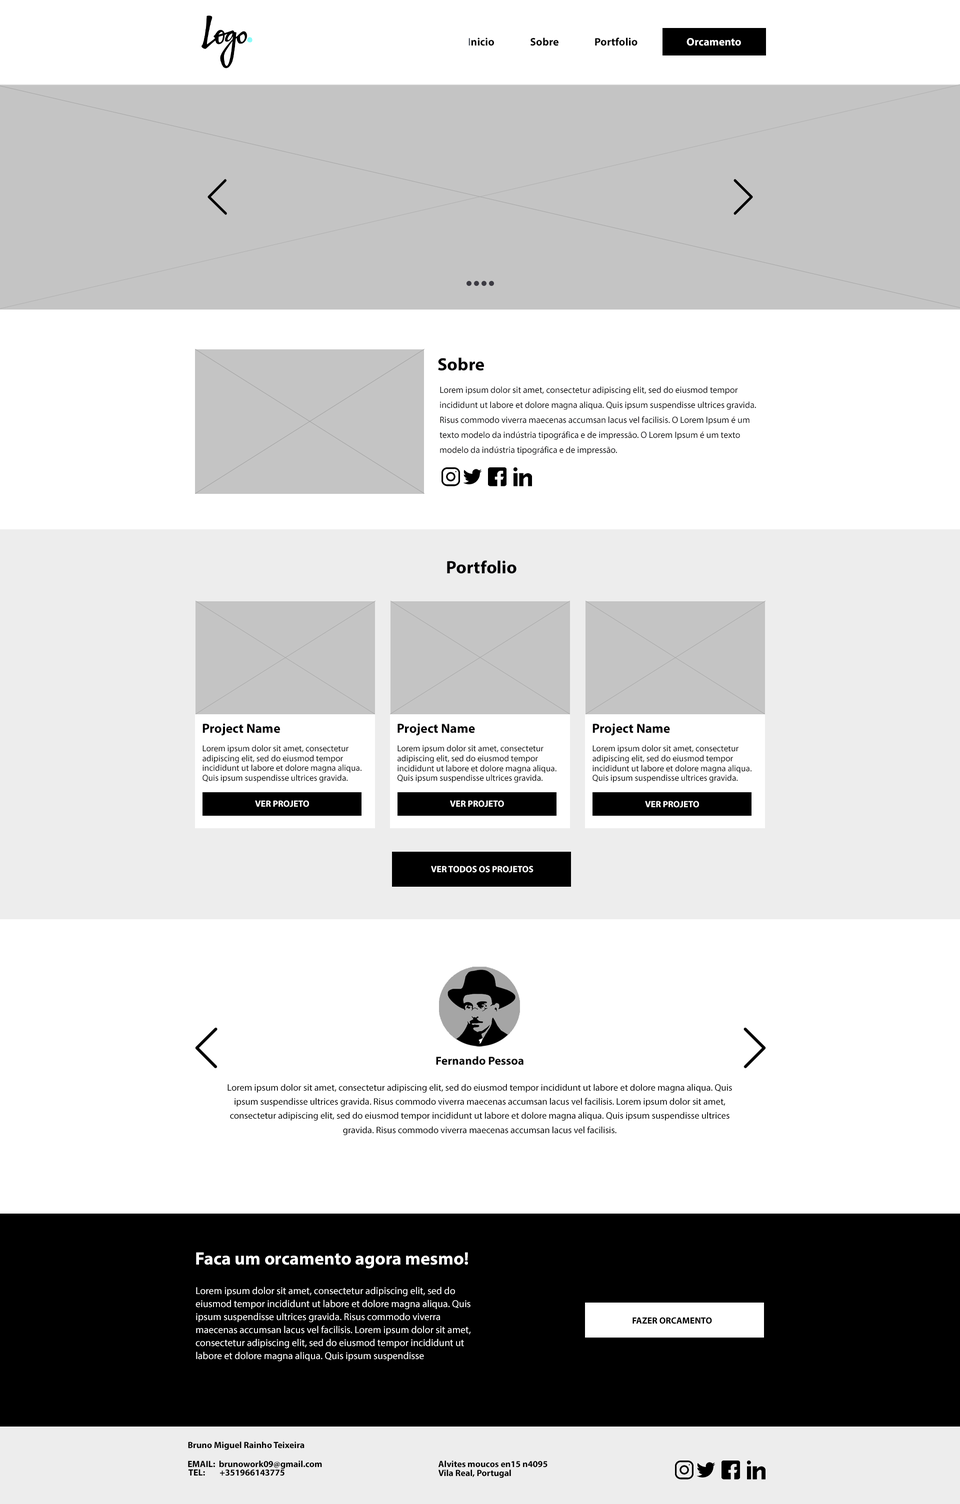
<style>
.page{position:relative;width:960px;height:1504px;background:#ffffff}
.page>*{position:absolute;margin:0}
.t1{font:18px "MyriadPro-Bold";color:#010002}
.t2{font:9px/15px "MyriadPro-Regular";color:#010002}
.t3{font:13.1px "MyriadPro-Bold";color:#010002}
.t4{font:8.7px/9.8px "MyriadPro-Regular";color:#000000}
.t5{font:9px "MyriadPro-Bold";color:#ffffff}
.t6{font:11.8px "MyriadPro-Bold";color:#000000}
.t7{font:9.4px/14.1px "MyriadPro-Regular";color:#000000}
.t8{font:18px "MyriadPro-Bold";color:#ffffff}
.t9{font:10px/13px "MyriadPro-Regular";color:#ffffff}
.t10{font:9px "MyriadPro-Bold";color:#010101}
.t11{font:9px/9px "MyriadPro-Bold";color:#010101}
</style>
<div class="page">
<p class="t1" style="left:438px;top:357px;width:46px;height:14px">Sobre</p>
<p class="t2" style="left:439px;top:386px;width:317px;height:69px">Lorem ipsum dolor sit amet, consectetur adipiscing elit, sed do eiusmod tempor incididunt ut labore et dolore magna aliqua. Quis ipsum suspendisse ultrices gravida. Risus commodo viverra maecenas accumsan lacus vel facilisis. O Lorem Ipsum é um texto modelo da indústria tipográfica e de impressão. O Lorem Ipsum é um texto modelo da indústria tipográfica e de impressão.</p>
<p class="t1" style="left:447px;top:560px;width:69px;height:14px">Portfolio</p>
<p class="t3" style="left:202px;top:723px;width:78px;height:13px">Project Name</p>
<p class="t3" style="left:397px;top:723px;width:78px;height:13px">Project Name</p>
<p class="t3" style="left:592px;top:723px;width:78px;height:13px">Project Name</p>
<p class="t4" style="left:202px;top:745px;width:159px;height:38px">Lorem ipsum dolor sit amet, consectetur adipiscing elit, sed do eiusmod tempor incididunt ut labore et dolore magna aliqua. Quis ipsum suspendisse ultrices gravida.</p>
<p class="t4" style="left:397px;top:745px;width:159px;height:38px">Lorem ipsum dolor sit amet, consectetur adipiscing elit, sed do eiusmod tempor incididunt ut labore et dolore magna aliqua. Quis ipsum suspendisse ultrices gravida.</p>
<p class="t4" style="left:592px;top:745px;width:159px;height:38px">Lorem ipsum dolor sit amet, consectetur adipiscing elit, sed do eiusmod tempor incididunt ut labore et dolore magna aliqua. Quis ipsum suspendisse ultrices gravida.</p>
<p class="t5" style="left:255px;top:800px;width:54px;height:7px">VER PROJETO</p>
<p class="t5" style="left:450px;top:800px;width:54px;height:7px">VER PROJETO</p>
<p class="t5" style="left:645px;top:801px;width:54px;height:7px">VER PROJETO</p>
<p class="t5" style="left:431px;top:866px;width:102px;height:7px">VER TODOS OS PROJETOS</p>
<p class="t6" style="left:436px;top:1056px;width:87px;height:9px">Fernando Pessoa</p>
<p class="t7" style="left:227px;top:1084px;width:505px;height:51px;text-align:center">Lorem ipsum dolor sit amet, consectetur adipiscing elit, sed do eiusmod tempor incididunt ut labore et dolore magna aliqua. Quis ipsum suspendisse ultrices gravida. Risus commodo viverra maecenas accumsan lacus vel facilisis. Lorem ipsum dolor sit amet, consectetur adipiscing elit, sed do eiusmod tempor incididunt ut labore et dolore magna aliqua. Quis ipsum suspendisse ultrices gravida. Risus commodo viverra maecenas accumsan lacus vel facilisis.</p>
<p class="t8" style="left:196px;top:1252px;width:272px;height:17px">Faca um orcamento agora mesmo!</p>
<p class="t9" style="left:195px;top:1287px;width:276px;height:75px">Lorem ipsum dolor sit amet, consectetur adipiscing elit, sed do eiusmod tempor incididunt ut labore et dolore magna aliqua. Quis ipsum suspendisse ultrices gravida. Risus commodo viverra maecenas accumsan lacus vel facilisis. Lorem ipsum dolor sit amet, consectetur adipiscing elit, sed do eiusmod tempor incididunt ut labore et dolore magna aliqua. Quis ipsum suspendisse</p>
<p class="t10" style="left:632px;top:1317px;width:80px;height:7px">FAZER ORCAMENTO</p>
<p class="t10" style="left:188px;top:1442px;width:116px;height:8px">Bruno Miguel Rainho Teixeira</p>
<p class="t10" style="left:188px;top:1461px;width:134px;height:8px">EMAIL:  brunowork09@gmail.com</p>
<p class="t10" style="left:188px;top:1469px;width:96px;height:7px">TEL:        +351966143775</p>
<p class="t11" style="left:438px;top:1461px;width:109px;height:17px">Alvites moucos en15 n4095<br>Vila Real, Portugal</p>
</div>
